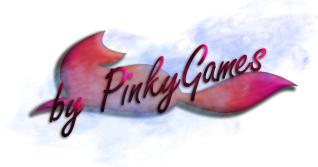
<style>
.page{position:relative;width:318px;height:167px;background:#ffffff}
.page>*{position:absolute;margin:0}
.t1{font:60.2px "FreestyleScript-Regular";letter-spacing:-0.02em}
</style>
<div class="page">
<p class="t1" style="left:49px;top:44px;width:218px;height:93px;rotate:-14deg">by PinkyGames</p>
</div>
